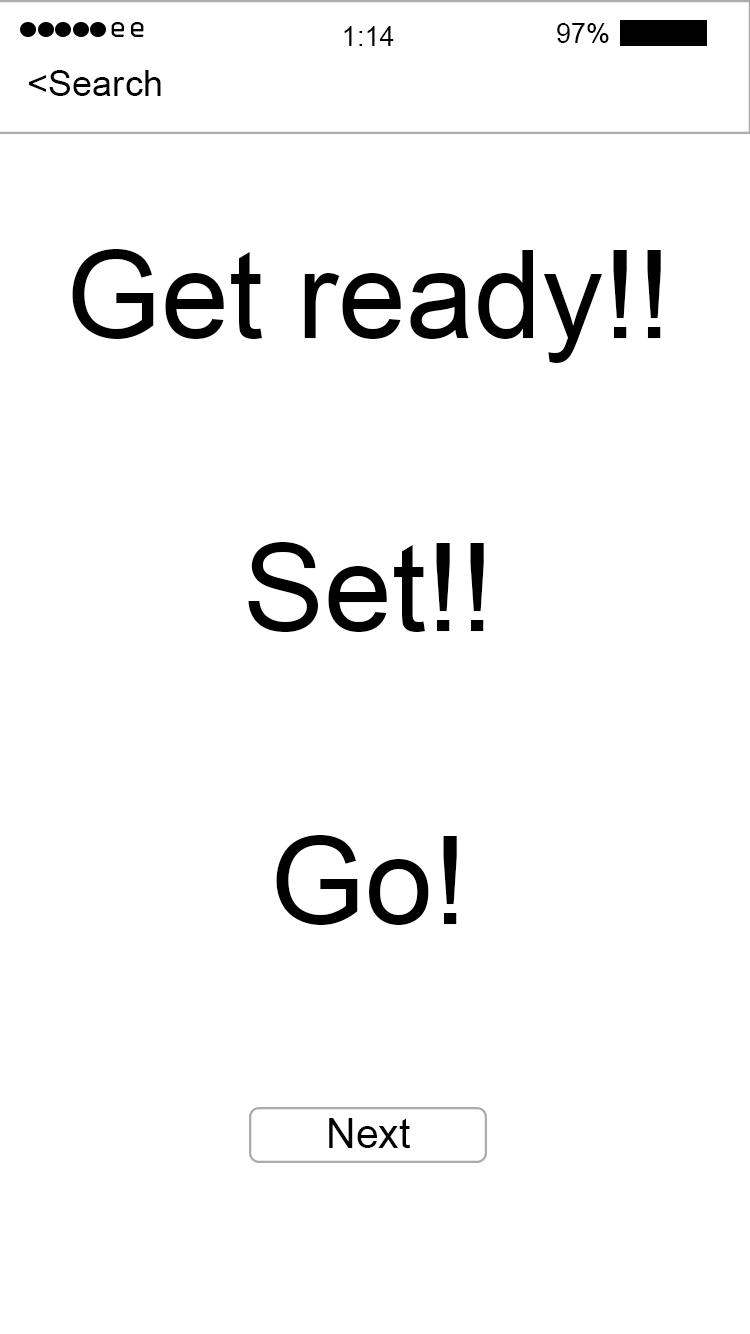
<style>
.page{position:relative;width:750px;height:1334px;background:#ffffff}
.page>*{position:absolute;margin:0}
.t1{font:27.2px "OCRAStd";color:#000000}
.t2{font:27.2px "ArialMT";color:#000000}
.t3{font:36.2px "ArialMT";color:#000000}
.t4{font:122.2px "ArialMT";color:#000000}
.t5{font:40.8px "ArialMT";color:#000000}
</style>
<div class="page">
<p class="t1" style="left:111px;top:22px;width:33px;height:15px">ee</p>
<p class="t2" style="left:344px;top:26px;width:50px;height:20px">1:14</p>
<p class="t2" style="left:557px;top:23px;width:52px;height:20px">97%</p>
<p class="t3" style="left:29px;top:70px;width:132px;height:26px">&lt;Search</p>
<p class="t4" style="left:72px;top:249px;width:589px;height:676px;text-align:center">Get ready!!<br><br>Set!!<br><br>Go!</p>
<p class="t5" style="left:329px;top:1118px;width:81px;height:30px">Next</p>
</div>
